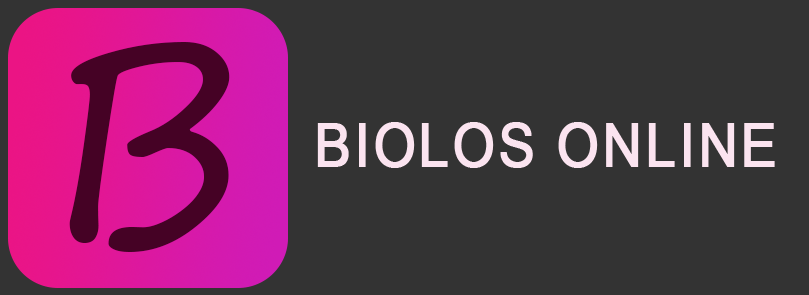
<style>
.page{position:relative;width:809px;height:295px;background:#333333}
.page>*{position:absolute;margin:0}
.t1{font:268px "SegoePrint";color:#450225}
.t2{font:59.7px "ArialMT";letter-spacing:0.04em;color:#fbe4f0;font-weight:bold;scale:0.91 1}
</style>
<div class="page">
<p class="t1" style="left:69px;top:41px;width:161px;height:211px">B</p>
<p class="t2" style="left:317px;top:122px;width:458px;height:46px">BIOLOS ONLINE</p>
</div>
